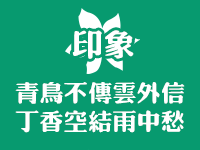
<style>
.page{position:relative;width:200px;height:150px;background:#079a6f}
.page>*{position:absolute;margin:0}
.t1{font:31.2px "¾­µä·±·ÂÔ² Regular";color:#ffffff}
.t2{font:23.7px "¾­µä·±·ÂÔ² Regular";color:#ffffff}
</style>
<div class="page">
<p class="t1" style="left:72px;top:30px;width:62px;height:29px">印象</p>
<p class="t2" style="left:15px;top:82px;width:170px;height:51px">青鸟不传云外信<br>丁香空结雨中愁</p>
</div>
